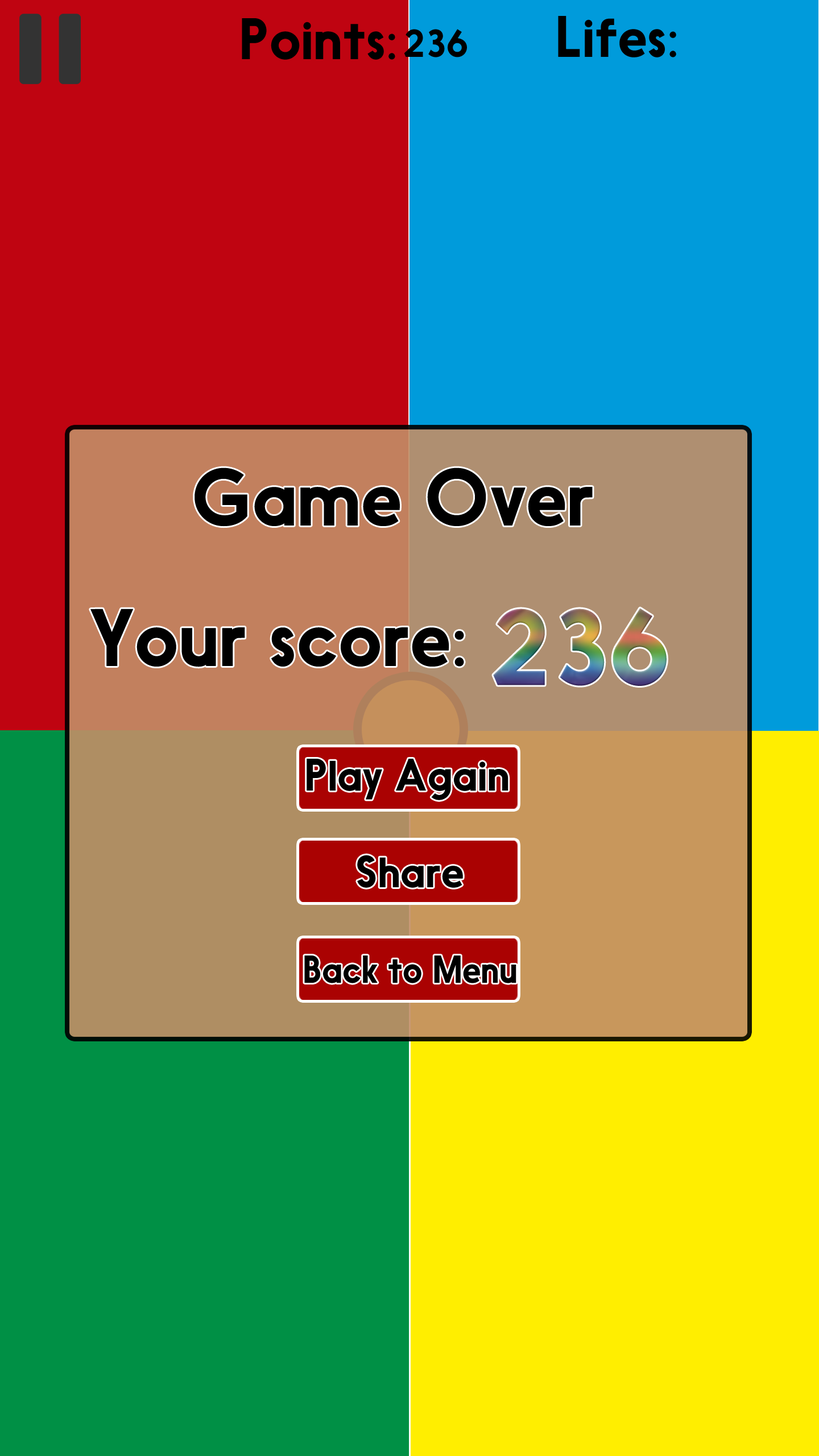
<style>
.page{position:relative;width:819px;height:1456px}
.page>*{position:absolute;margin:0}
.t1{font:54.6px "Nanami";color:#000000}
.t2{font:36.4px "Nanami";color:#000000}
.t3{font:75.8px "Nanami";color:#000000}
.t4{font:100.4px "Nanami"}
.t5{font:42.5px "Nanami";color:#000000}
.t6{font:36.4px "Nanami";color:#000000;scale:0.95 1}
</style>
<div class="page">
<p class="t1" style="left:558px;top:16px;width:118px;height:41px">Lifes:</p>
<p class="t1" style="left:242px;top:18px;width:153px;height:42px">Points:</p>
<p class="t2" style="left:404px;top:29px;width:63px;height:28px">236</p>
<p class="t3" style="left:195px;top:468px;width:398px;height:59px">Game Over</p>
<p class="t3" style="left:90px;top:609px;width:374px;height:58px">Your score:</p>
<p class="t4" style="left:493px;top:608px;width:174px;height:78px">236</p>
<p class="t5" style="left:307px;top:759px;width:201px;height:41px">Play Again</p>
<p class="t5" style="left:357px;top:855px;width:106px;height:33px">Share</p>
<p class="t6" style="left:304px;top:955px;width:212px;height:28px">Back to Menu</p>
</div>
